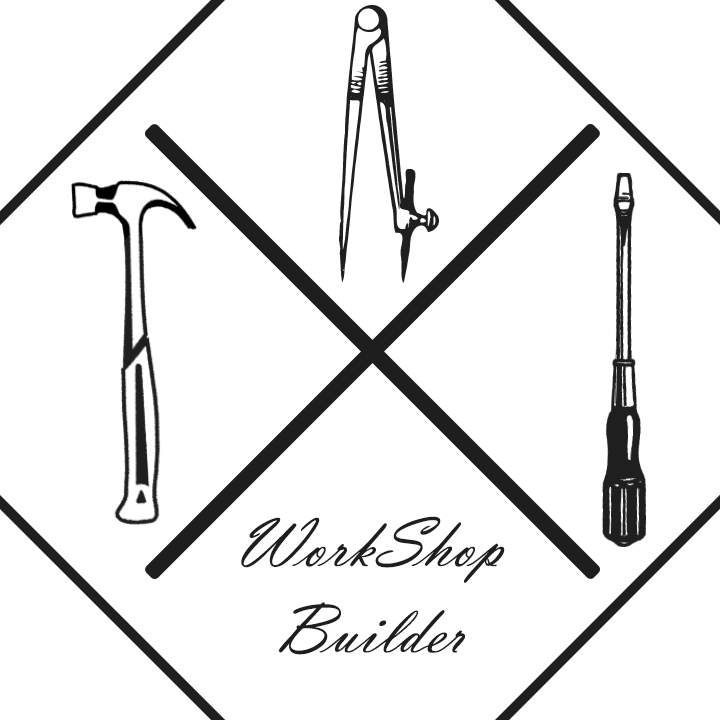
<style>
.page{position:relative;width:720px;height:720px;background:#ffffff}
.page>*{position:absolute;margin:0}
.t1{font:72px "VladimirScript";color:#1e1e1e}
</style>
<div class="page">
<p class="t1" style="left:241px;top:516px;width:264px;height:139px;text-align:center">WorkShop<br>Builder</p>
</div>
